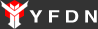
<style>
.page{position:relative;width:98px;height:29px;background:#333333}
.page>*{position:absolute;margin:0}
.t1{font:17.2px "HelveticaLTStd-Bold";letter-spacing:0.24em;color:#ffffff;scale:1.16 1}
</style>
<div class="page">
<p class="t1" style="left:29px;top:10px;width:68px;height:13px">YFDN</p>
</div>
